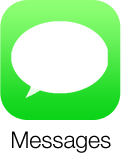
<style>
.page{position:relative;width:121px;height:153px;background:#ffffff}
.page>*{position:absolute;margin:0}
.t1{font:23px "HelveticaNeue-Light";color:#000000}
</style>
<div class="page">
<p class="t1" style="left:12px;top:131px;width:99px;height:22px">Messages</p>
</div>
